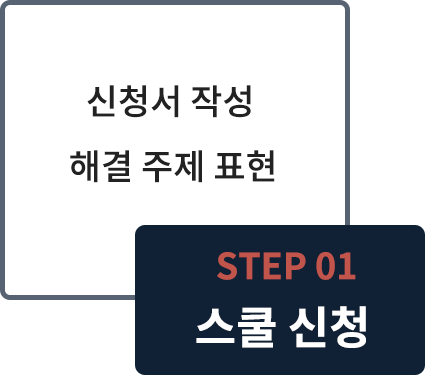
<style>
.page{position:relative;width:425px;height:375px;background:#ffffff}
.page>*{position:absolute;margin:0}
.t1{font:35px "NotoSansCJKkr-Medium";color:#222222}
.t2{font:36px "NotoSansCJKkr-Bold";color:#c1554b}
.t3{font:45px "NotoSansCJKkr-Bold";color:#ffffff}
</style>
<div class="page">
<p class="t1" style="left:87px;top:85px;width:164px;height:33px">신청서 작성</p>
<p class="t1" style="left:70px;top:150px;width:205px;height:33px">해결 주제 표현</p>
<p class="t2" style="left:217px;top:252px;width:139px;height:28px">STEP 01</p>
<p class="t3" style="left:196px;top:306px;width:170px;height:42px">스쿨 신청</p>
</div>
